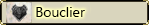
<style>
.page{position:relative;width:149px;height:25px;background:#d9d5bd}
.page>*{position:absolute;margin:0}
.t1{font:14px "LaoUI";color:#000000}
</style>
<div class="page">
<p class="t1" style="left:36px;top:7px;width:49px;height:10px">Bouclier</p>
</div>
